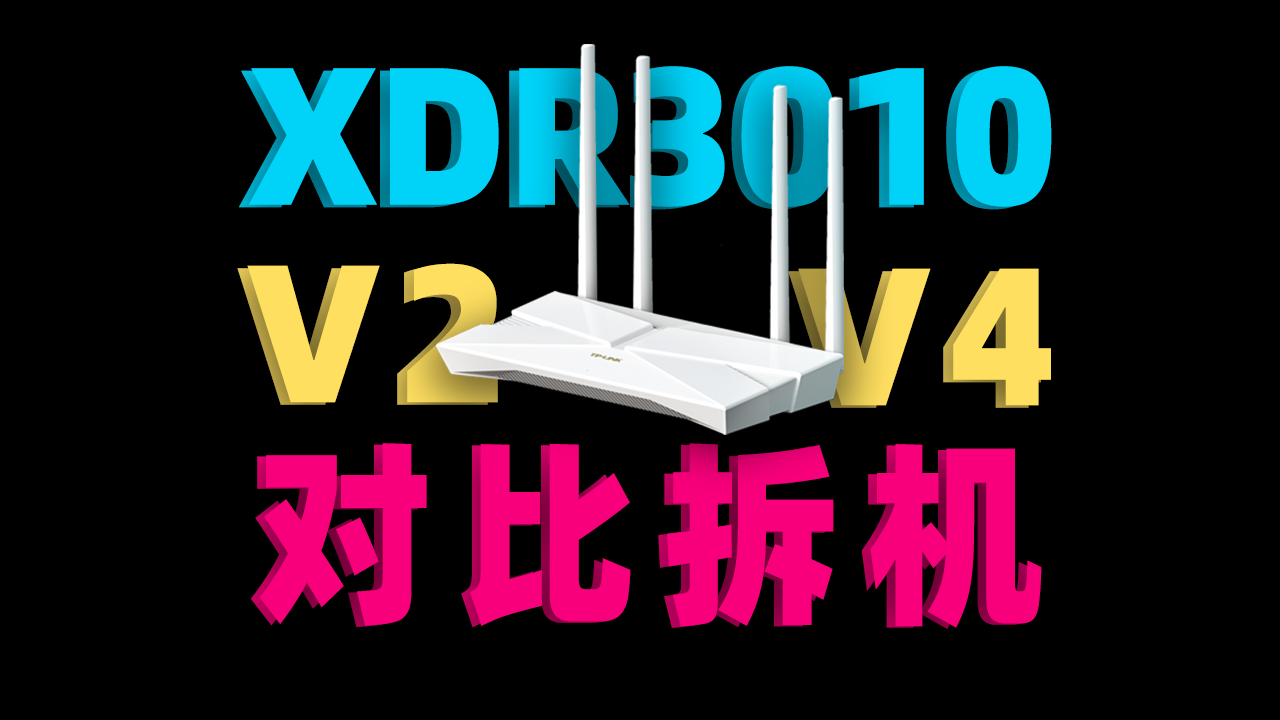
<style>
.page{position:relative;width:1280px;height:720px;background:#000000}
.page>*{position:absolute;margin:0}
.t1{font:196.3px "AlibabaPuHuiTi-Heavy";scale:0.91 1}
.t2{font:196.3px "AlibabaPuHuiTi-Heavy";color:#00d2f8;scale:0.91 1}
.t3{font:196.3px "AlibabaPuHuiTi-Heavy";letter-spacing:0.1em;scale:0.91 1}
.t4{font:196.3px "AlibabaPuHuiTi-Heavy";letter-spacing:0.1em;color:#ffed71;scale:0.91 1}
.t5{font:196.3px "AlibabaPuHuiTi-Heavy";letter-spacing:0.15em;color:#f8007b;scale:0.91 1}
</style>
<div class="page">
<p class="t1" style="left:239px;top:69px;width:803px;height:141px">XDR3010</p>
<p class="t2" style="left:248px;top:66px;width:804px;height:141px">XDR3010</p>
<p class="t3" style="left:237px;top:266px;width:251px;height:139px">V2</p>
<p class="t4" style="left:247px;top:263px;width:251px;height:140px">V2</p>
<p class="t4" style="left:798px;top:268px;width:253px;height:138px">V4</p>
<p class="t3" style="left:788px;top:271px;width:253px;height:137px">V4</p>
<p class="t5" style="left:251px;top:444px;width:782px;height:185px">对比拆机</p>
<p class="t5" style="left:259px;top:443px;width:783px;height:185px">对比拆机</p>
</div>
